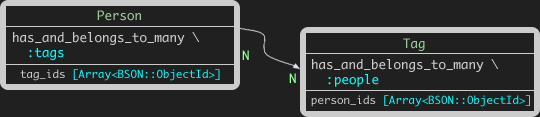
<style>
.page{position:relative;width:540px;height:117px;background:#202020}
.page>*{position:absolute;margin:0}
.t1{font:12.5px "Monaco";color:#99cc99}
.t2{font:12.5px "Monaco";color:#cccccc}
.t3{font:12.5px "Monaco";color:#00ffff}
.t4{font:12.5px "Monaco";color:#99ff99}
.t5{font:10.8px "Monaco";color:#00ffff}
.t6{font:10.8px "Monaco";color:#cccccc}
</style>
<div class="page">
<p class="t1" style="left:97px;top:10px;width:44px;height:11px">Person</p>
<p class="t2" style="left:13px;top:32px;width:187px;height:28px">has_and_belongs_to_many \<br>  <span class="t3">:tags</span></p>
<p class="t1" style="left:403px;top:38px;width:22px;height:13px">Tag</p>
<p class="t4" style="left:242px;top:50px;width:7px;height:10px">N</p>
<p class="t2" style="left:312px;top:59px;width:187px;height:28px">has_and_belongs_to_many \<br>  <span class="t3">:people</span></p>
<p class="t5" style="left:20px;top:69px;width:200px;height:12px"><span class="t6">tag_ids </span>[Array&lt;BSON::ObjectId&gt;]</p>
<p class="t4" style="left:289px;top:73px;width:7px;height:10px">N</p>
<p class="t5" style="left:311px;top:95px;width:219px;height:12px"><span class="t6">person_ids </span>[Array&lt;BSON::ObjectId&gt;]</p>
</div>
